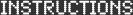
<style>
.page{position:relative;width:133px;height:15px;background:#333333}
.page>*{position:absolute;margin:0}
.t1{font:20px "SynchroLET";color:#ffffff}
</style>
<div class="page">
<p class="t1" style="left:0px;top:0px;width:133px;height:15px">INSTRUCTIONS</p>
</div>
